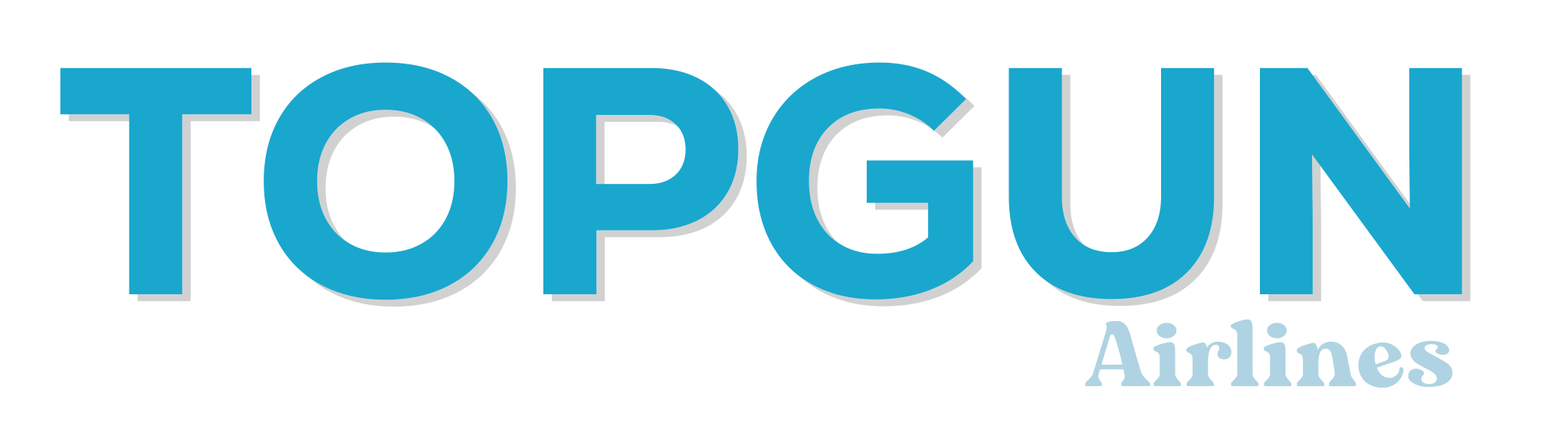
<style>
.page{position:relative;width:1568px;height:439px;background:#ffffff}
.page>*{position:absolute;margin:0}
.t1{font:323.1px "Nexa-Heavy";color:#19a7ce}
.t2{font:93.5px "Mogena";color:#afd3e2}
</style>
<div class="page">
<p class="t1" style="left:60px;top:62px;width:1402px;height:238px">TOPGUN</p>
<p class="t2" style="left:1084px;top:320px;width:369px;height:68px">Airlines</p>
</div>
